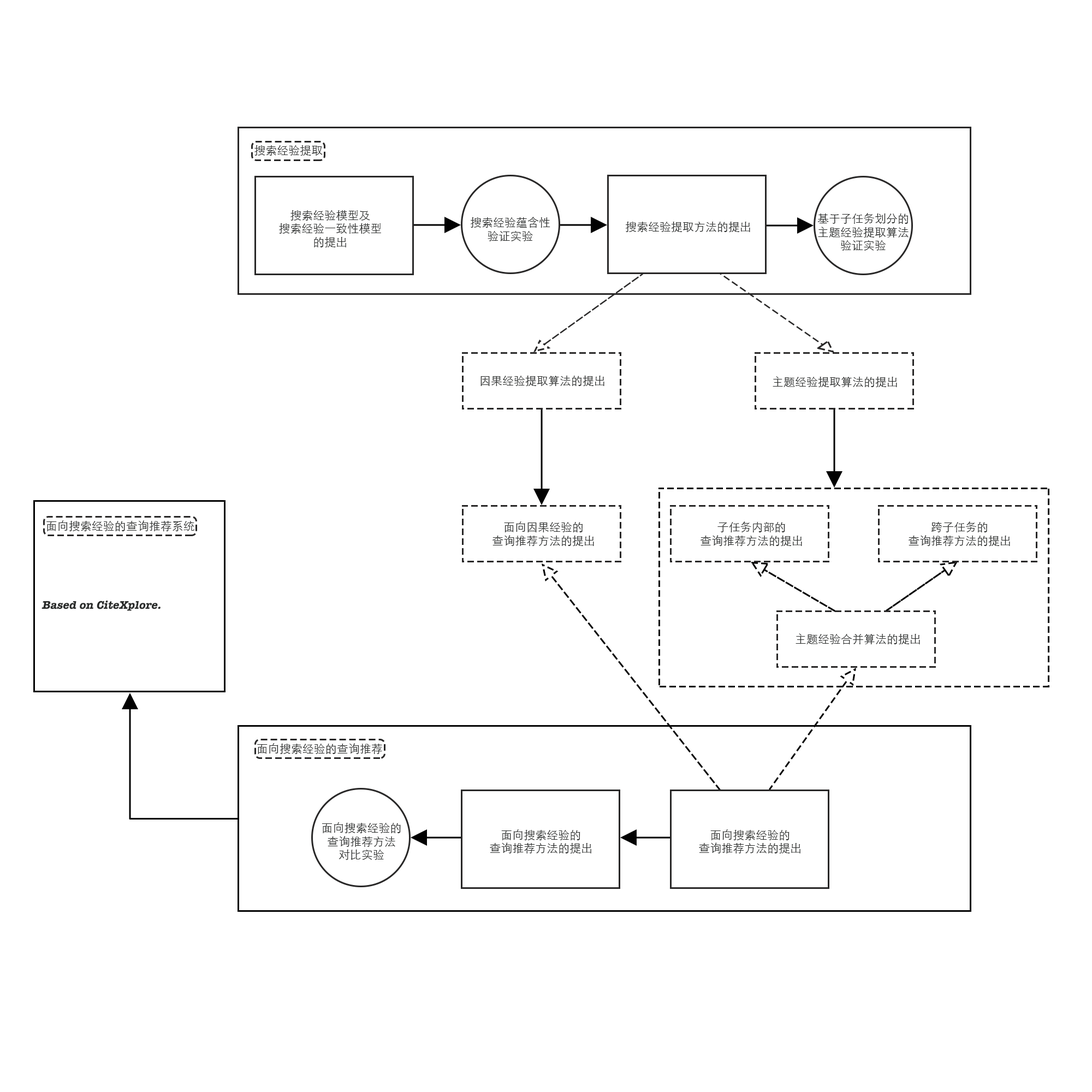
<style>
.page{position:relative;width:1092px;height:1092px;background:#ffffff}
.page>*{position:absolute;margin:0}
.t1{font:11.5px "STHeitiSC-Light";color:#292b2a}
.t2{font:11.5px "AmericanTypewriter-Bold";color:#292b2a;font-style:italic}
</style>
<div class="page">
<p class="t1" style="left:254px;top:145px;width:69px;height:11px">搜索经验提取</p>
<p class="t1" style="left:279px;top:210px;width:102px;height:37px;text-align:center">搜索经验模型及<br>搜索经验一致性模型<br>的提出</p>
<p class="t1" style="left:470px;top:217px;width:80px;height:24px;text-align:center">搜索经验蕴含性<br>验证实验</p>
<p class="t1" style="left:625px;top:222px;width:125px;height:10px">搜索经验提取方法的提出</p>
<p class="t1" style="left:817px;top:213px;width:92px;height:38px;text-align:center">基于子任务划分的<br>主题经验提取算法<br>验证实验</p>
<p class="t1" style="left:480px;top:376px;width:124px;height:10px">因果经验提取算法的提出</p>
<p class="t1" style="left:773px;top:376px;width:124px;height:11px">主题经验提取算法的提出</p>
<p class="t1" style="left:46px;top:520px;width:148px;height:11px">面向搜索经验的查询推荐系统</p>
<p class="t1" style="left:492px;top:521px;width:102px;height:25px;text-align:center">面向因果经验的<br>查询推荐方法的提出</p>
<p class="t1" style="left:700px;top:521px;width:102px;height:25px;text-align:center">子任务内部的<br>查询推荐方法的提出</p>
<p class="t1" style="left:908px;top:521px;width:102px;height:25px;text-align:center">跨子任务的<br>查询推荐方法的提出</p>
<p class="t2" style="left:41px;top:600px;width:120px;height:11px">Based on CiteXplore.</p>
<p class="t1" style="left:796px;top:633px;width:124px;height:11px">主题经验合并算法的提出</p>
<p class="t1" style="left:257px;top:743px;width:125px;height:11px">面向搜索经验的查询推荐</p>
<p class="t1" style="left:322px;top:822px;width:79px;height:38px;text-align:center">面向搜索经验的<br>查询推荐方法<br>对比实验</p>
<p class="t1" style="left:490px;top:829px;width:102px;height:24px;text-align:center">面向搜索经验的<br>查询推荐方法的提出</p>
<p class="t1" style="left:699px;top:829px;width:102px;height:24px;text-align:center">面向搜索经验的<br>查询推荐方法的提出</p>
</div>
